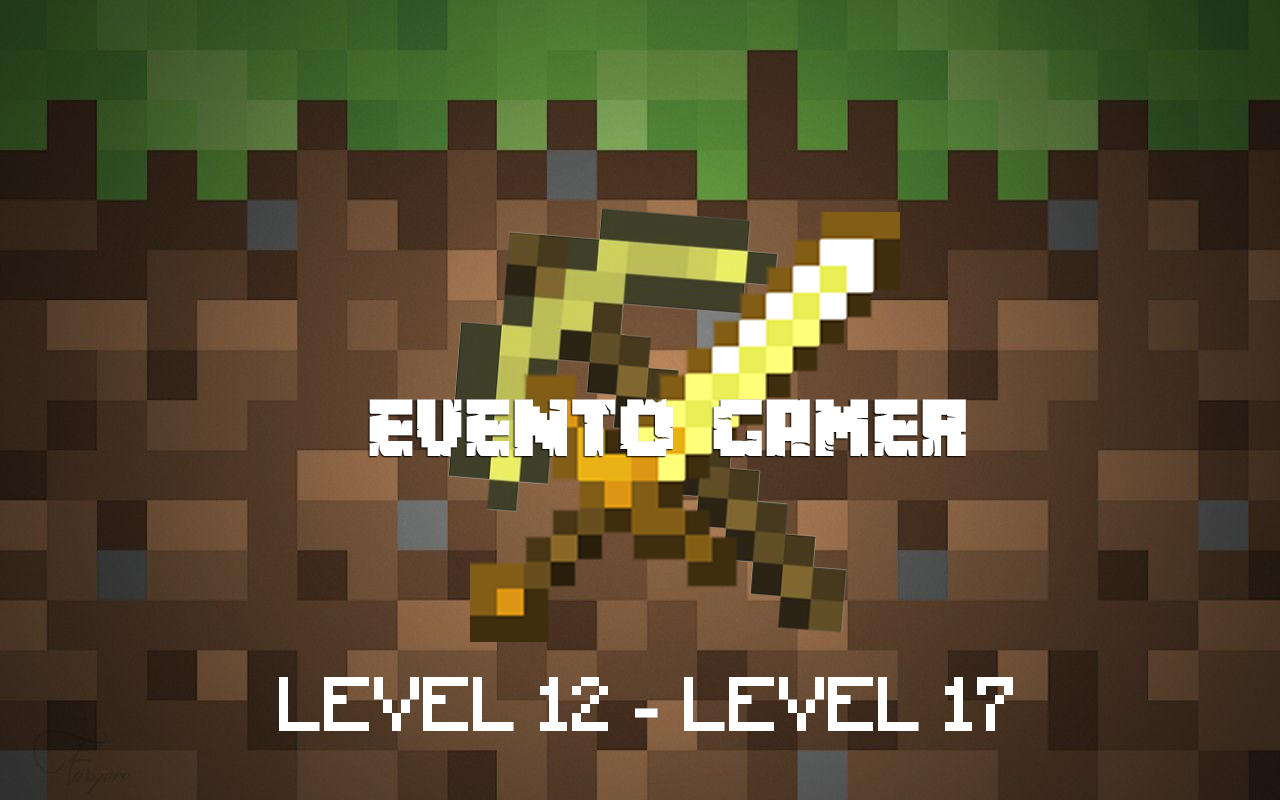
<style>
.page{position:relative;width:1280px;height:800px}
.page>*{position:absolute;margin:0}
.t1{font:72px "MinecrafterAlt";color:#ffffff}
.t2{font:72px "Minecraft";color:#ffffff}
</style>
<div class="page">
<p class="t1" style="left:369px;top:399px;width:597px;height:58px">EVENTO GAMER</p>
<p class="t2" style="left:279px;top:677px;width:734px;height:54px">LEVEL 12 - LEVEL 17</p>
</div>
